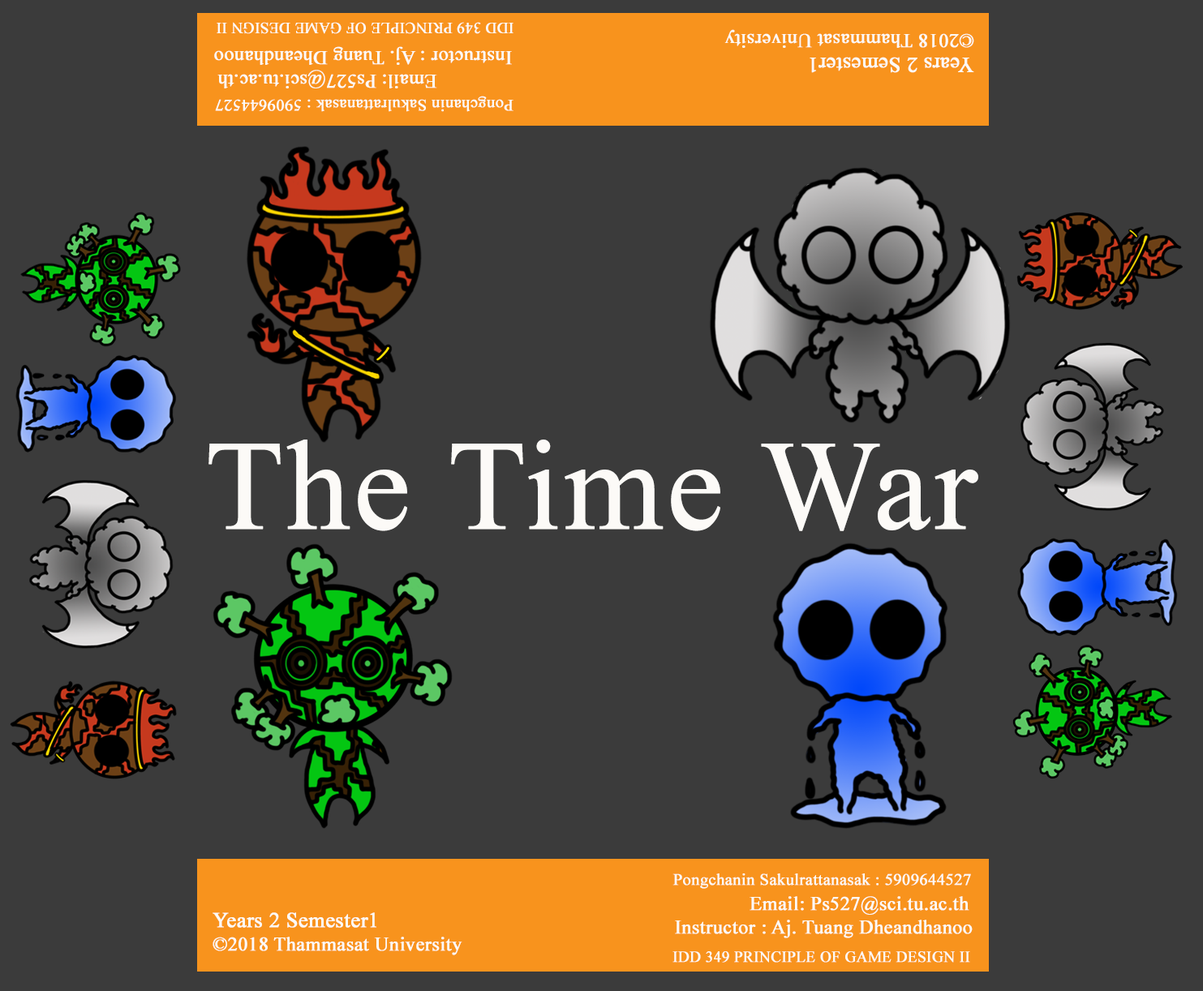
<style>
.page{position:relative;width:1203px;height:991px;background:#3b3b3b}
.page>*{position:absolute;margin:0}
.t1{font:15.4px "TimesNewRomanPSMT";color:#fcfaf7;font-weight:bold}
.t2{font:19.5px "TimesNewRomanPSMT";color:#fcfaf7;font-weight:bold}
.t3{font:21.2px "TimesNewRomanPSMT";color:#fcfaf7;font-weight:bold}
.t4{font:16.5px "TimesNewRomanPSMT";color:#fcfaf7;font-weight:bold}
.t5{font:128px "TimesNewRomanPSMT";color:#fcfaf7;font-weight:bold}
</style>
<div class="page">
<p class="t1" style="left:217px;top:22px;width:296px;height:12px;rotate:180deg">IDD 349 PRINCIPLE OF GAME DESIGN II</p>
<p class="t2" style="left:724px;top:29px;width:250px;height:19px;rotate:180deg">©2018 Thammasat University</p>
<p class="t2" style="left:214px;top:46px;width:298px;height:19px;rotate:180deg">Instructor : Aj. Tuang Dheandhanoo</p>
<p class="t3" style="left:810px;top:57px;width:164px;height:16px;rotate:180deg">Years 2 Semester1</p>
<p class="t2" style="left:217px;top:70px;width:220px;height:18px;rotate:180deg">Email: Ps527@sci.tu.ac.th</p>
<p class="t4" style="left:215px;top:96px;width:298px;height:16px;rotate:180deg">Pongchanin Sakulrattanasak : 5909644527</p>
<p class="t5" style="left:208px;top:440px;width:770px;height:91px">The Time War</p>
<p class="t4" style="left:672px;top:874px;width:299px;height:15px">Pongchanin Sakulrattanasak : 5909644527</p>
<p class="t2" style="left:750px;top:896px;width:219px;height:19px">Email: Ps527@sci.tu.ac.th</p>
<p class="t3" style="left:213px;top:913px;width:163px;height:15px">Years 2 Semester1</p>
<p class="t2" style="left:675px;top:920px;width:298px;height:19px">Instructor : Aj. Tuang Dheandhanoo</p>
<p class="t2" style="left:213px;top:937px;width:249px;height:19px">©2018 Thammasat University</p>
<p class="t1" style="left:672px;top:951px;width:298px;height:12px">IDD 349 PRINCIPLE OF GAME DESIGN II</p>
</div>
